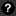
<style>
.page{position:relative;width:16px;height:16px;background:#000000}
.page>*{position:absolute;margin:0}
.t1{font:11.5px "Helvetica-Bold";color:#ffffff}
</style>
<div class="page">
<p class="t1" style="left:5px;top:3px;width:6px;height:9px">?</p>
</div>
